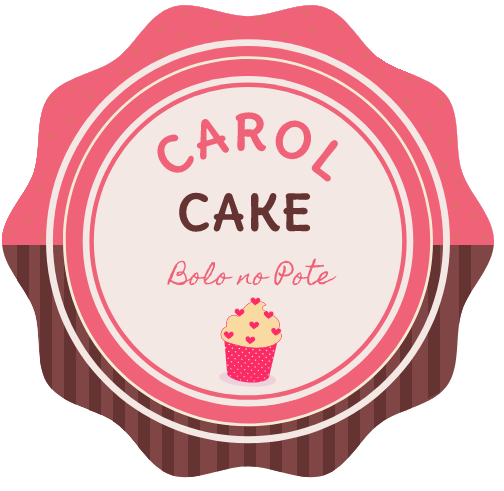
<style>
.page{position:relative;width:504px;height:491px;background:#f4e8e4}
.page>*{position:absolute;margin:0}
.t1{font:50px "DeliusUnicase-Bold";color:#f06278}
.t2{font:50px "DeliusUnicase-Bold";color:#653332}
</style>
<div class="page">
<p class="t1" style="left:156px;top:112px;width:184px;height:70px;rotate:19deg">CAROL</p>
<p class="t2" style="left:179px;top:192px;width:132px;height:40px">CAKE</p>
</div>
